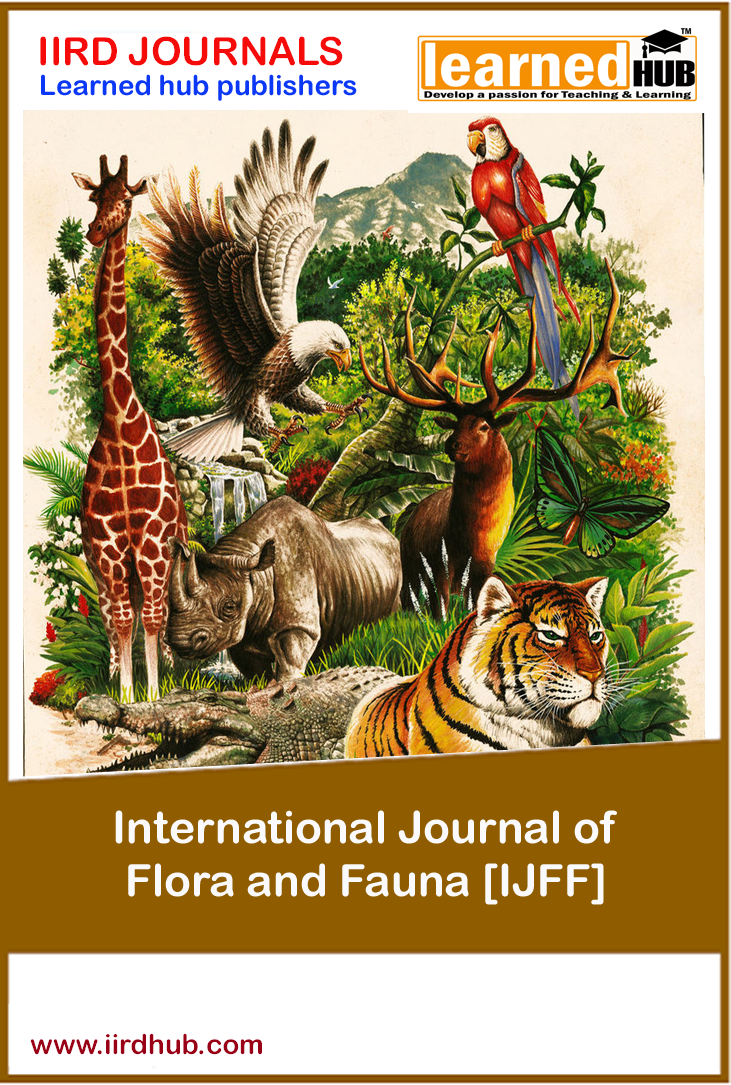
<style>
.page{position:relative;width:731px;height:1085px}
.page>*{position:absolute;margin:0}
.t1{font:38.9px "ArialRoundedMTBold";color:#f60b0b}
.t2{font:27.8px "ArialRoundedMTBold";color:#0b37f6}
.t3{font:44.4px "ArialRoundedMTBold";color:#fafafc}
.t4{font:27.8px "ArialRoundedMTBold";color:#990016}
</style>
<div class="page">
<p class="t1" style="left:40px;top:36px;width:303px;height:30px">IIRD JOURNALS</p>
<p class="t2" style="left:41px;top:74px;width:316px;height:27px">Learned hub publishers</p>
<p class="t3" style="left:115px;top:810px;width:502px;height:95px;text-align:center">International Journal of <br>Flora and Fauna [IJFF]</p>
<p class="t4" style="left:30px;top:1033px;width:232px;height:22px">www.iirdhub.com</p>
</div>
